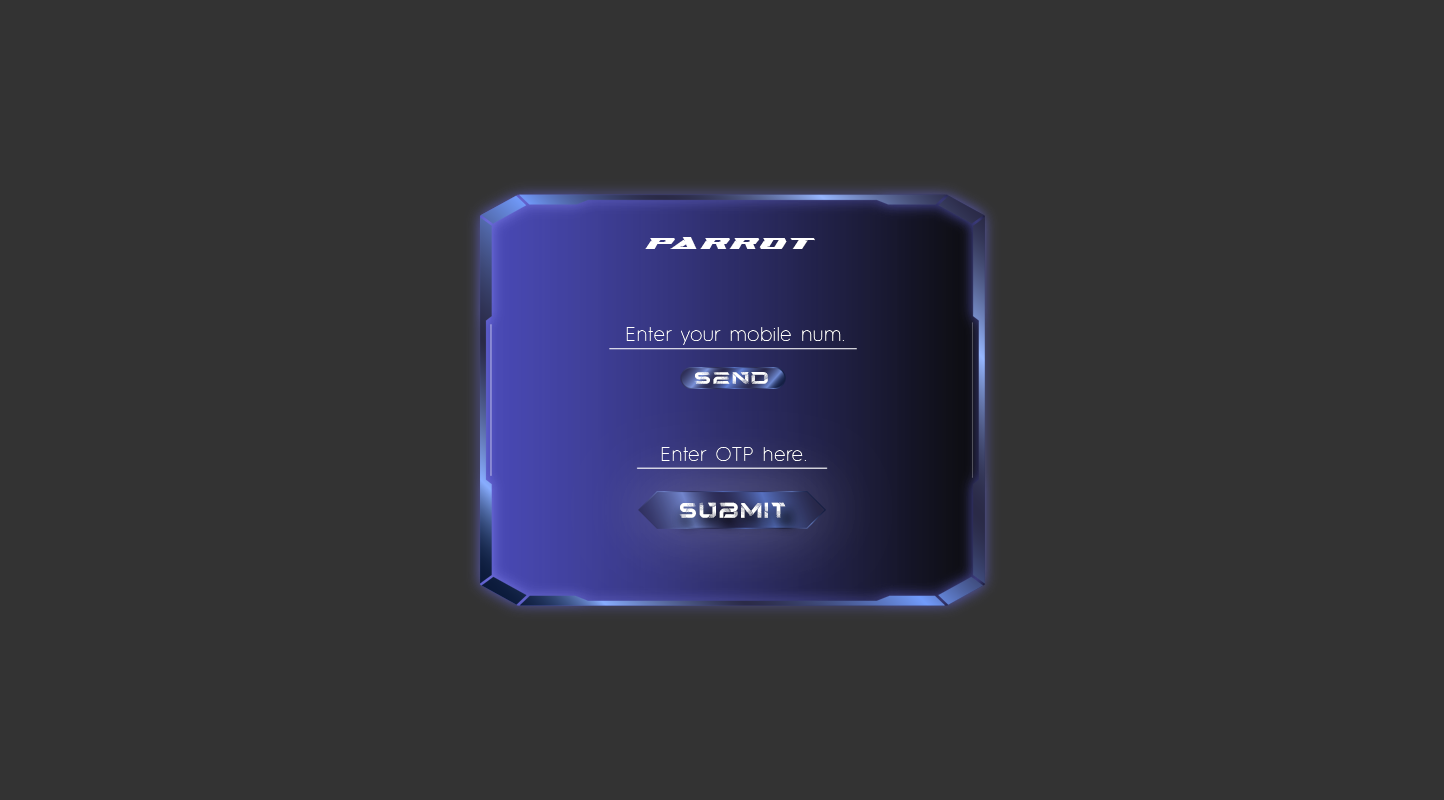
<style>
.page{position:relative;width:1444px;height:800px;background:#333333}
.page>*{position:absolute;margin:0}
.t1{font:16px "SwipeRaceDemoRegular";letter-spacing:0.184em;color:#ffffff}
.t2{font:20px "HurmeGeometricSans1-Thin";letter-spacing:0.034em;color:#ffffff}
.t3{font:17.2px "Tourner-Regular";letter-spacing:0.11em;color:#ffffff;scale:1.21 1}
.t4{font:22px "Tourner-Regular";letter-spacing:0.111em;color:#ffffff}
</style>
<div class="page">
<p class="t1" style="left:645px;top:237px;width:170px;height:12px">Parrot</p>
<p class="t2" style="left:626px;top:327px;width:218px;height:18px">Enter your mobile num.</p>
<p class="t3" style="left:694px;top:372px;width:74px;height:12px">send</p>
<p class="t2" style="left:661px;top:447px;width:145px;height:14px">Enter OTP here.</p>
<p class="t4" style="left:679px;top:502px;width:107px;height:16px">submit</p>
</div>
